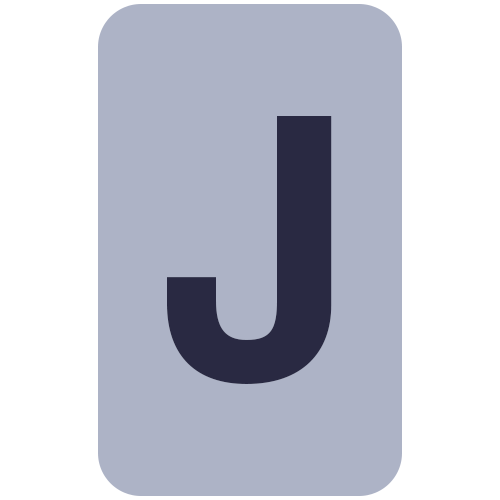
<style>
.page{position:relative;width:500px;height:500px;background:#adb3c6}
.page>*{position:absolute;margin:0}
.t1{font:389.7px "CoolveticaRg-Regular";color:#292942}
</style>
<div class="page">
<p class="t1" style="left:167px;top:116px;width:165px;height:268px">J</p>
</div>
